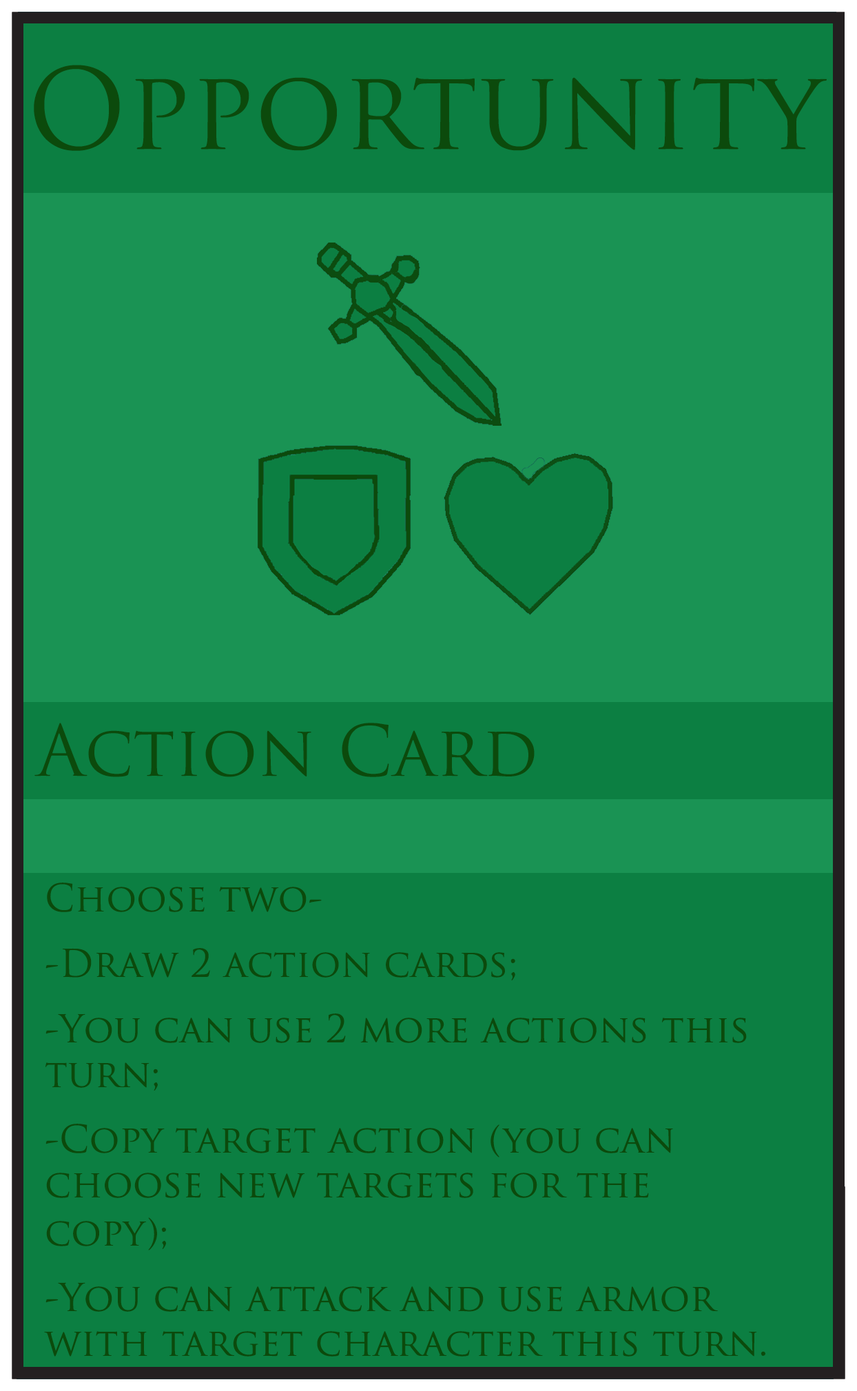
<style>
.page{position:relative;width:857px;height:1391px;background:#0c7f42}
.page>*{position:absolute;margin:0}
.t1{font:109.1px "TrajanPro-Regular";color:#0c4a0c}
.t2{font:68.9px "TrajanPro-Regular";color:#0c4a0c}
.t3{font:37.3px "TrajanPro-Regular";color:#0c4a0c}
</style>
<div class="page">
<p class="t1" style="left:34px;top:65px;width:793px;height:86px">Opportunity</p>
<p class="t2" style="left:34px;top:723px;width:501px;height:54px">Action Card</p>
<p class="t3" style="left:44px;top:883px;width:722px;height:474px">Choose two- <br><br>-Draw 2 action cards; <br><br>-You can use 2 more actions this <br>turn; <br><br>-Copy target action (you can <br>choose new targets for the <br>copy); <br><br>-You can attack and use armor <br>with target character this turn.</p>
</div>
